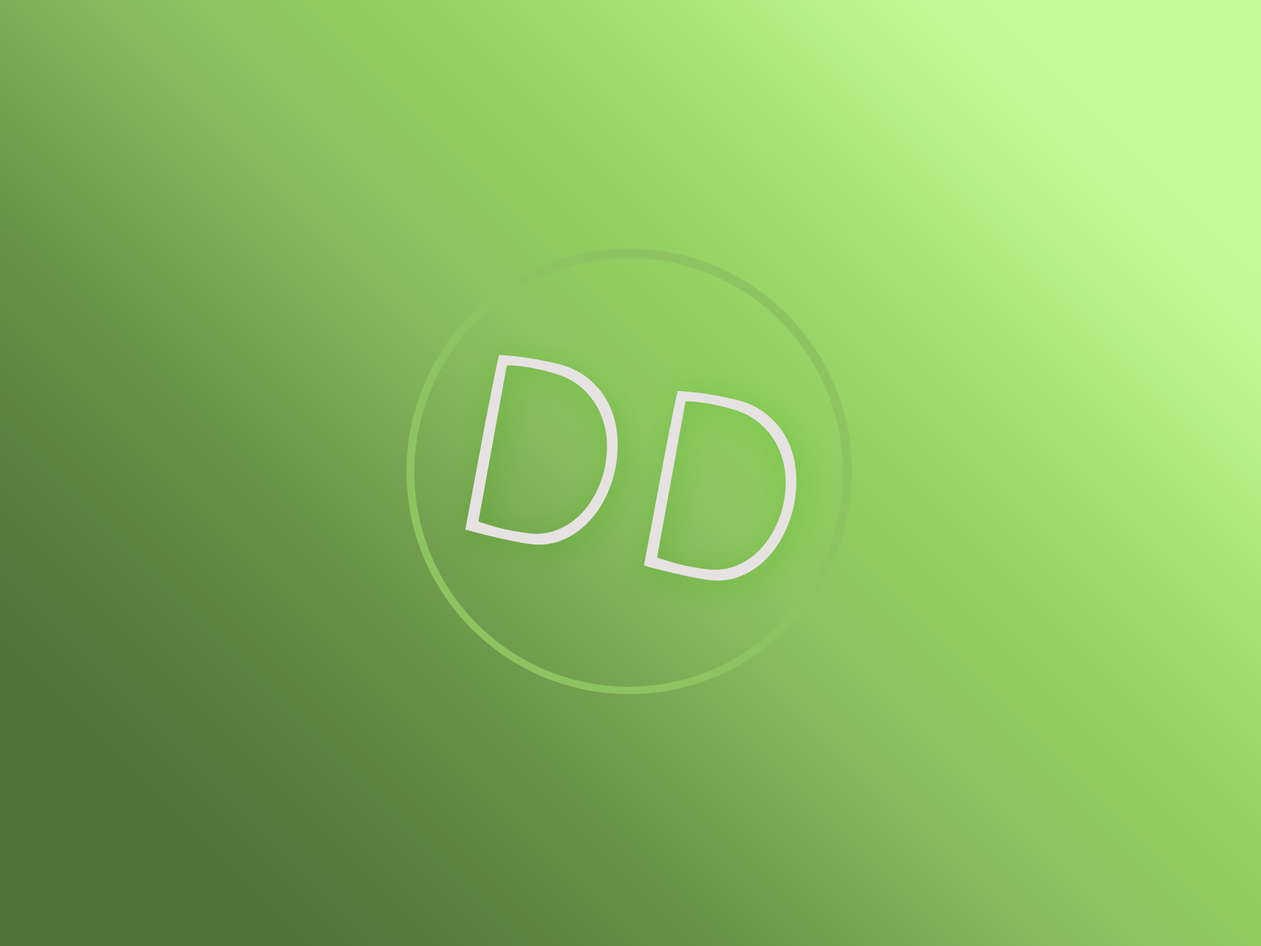
<style>
.page{position:relative;width:1261px;height:946px}
.page>*{position:absolute;margin:0}
.t1{font:246.3px "cafbrewery";letter-spacing:0.14em;color:#e6e2e2}
</style>
<div class="page">
<p class="t1" style="left:465px;top:355px;width:332px;height:226px;rotate:11deg">DD</p>
</div>
